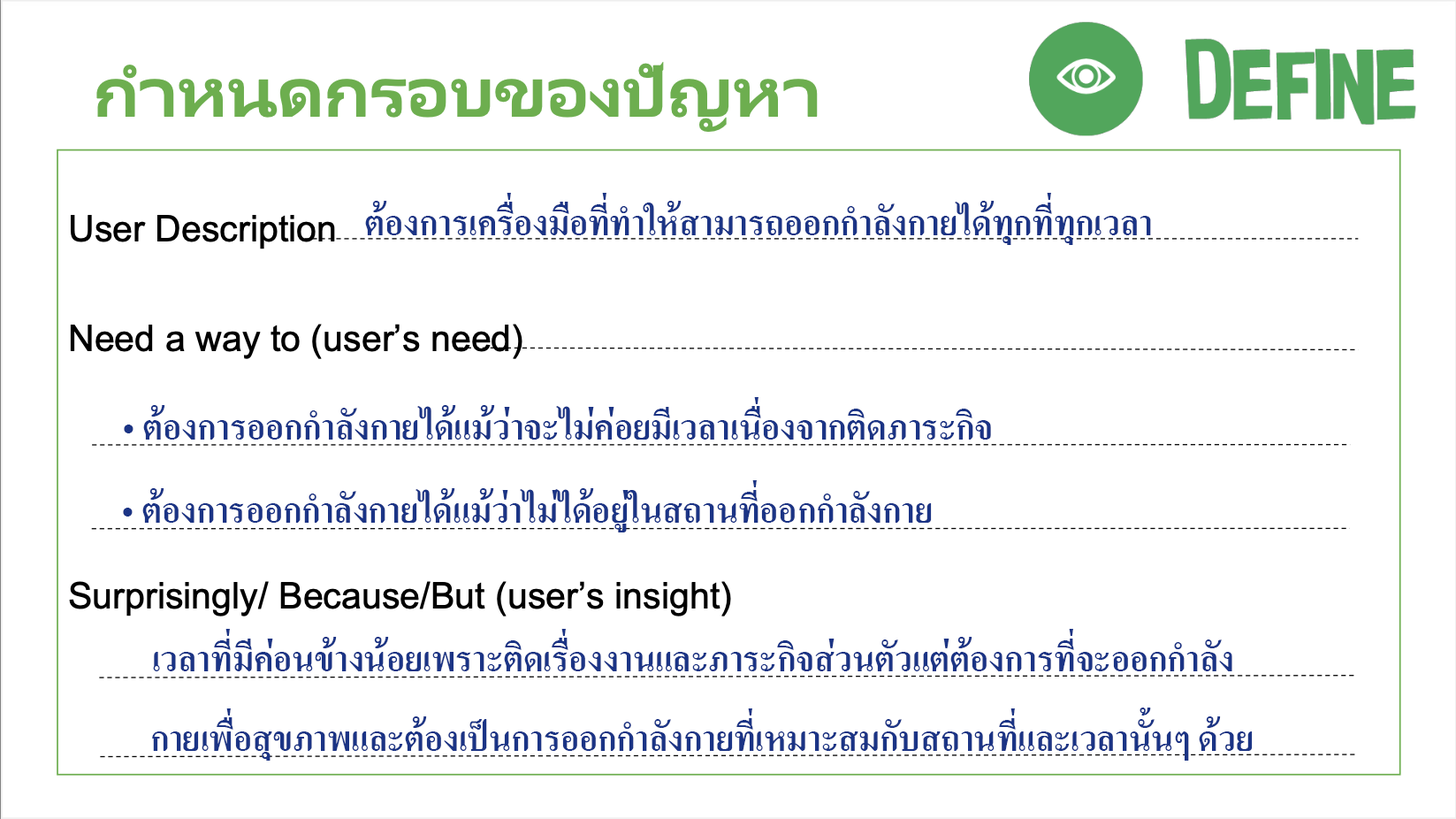
<style>
.page{position:relative;width:1456px;height:819px;background:#ffffff}
.page>*{position:absolute;margin:0}
.t1{font:48.6px "AngsanaUPC-Bold";color:#1b3485}
</style>
<div class="page">
<p class="t1" style="left:365px;top:193px;width:786px;height:52px">ต้องการเครื่องมือที่ทำให้สามารถออกกำลังกายได้ทุกที่ทุกเวลา</p>
<p class="t1" style="left:124px;top:397px;width:867px;height:42px">• ต้องการออกกำลังกายได้แม้ว่าจะไม่ค่อยมีเวลาเนื่องจากติดภาระกิจ</p>
<p class="t1" style="left:123px;top:480px;width:809px;height:52px">• ต้องการออกกำลังกายได้แม้ว่าไม่ได้อยู่ในสถานที่ออกกำลังกาย</p>
<p class="t1" style="left:153px;top:629px;width:1080px;height:42px">เวลาที่มีค่อนข้างน้อยเพราะติดเรื่องงานและภาระกิจส่วนตัวแต่ต้องการที่จะออกกำลัง</p>
<p class="t1" style="left:152px;top:707px;width:1101px;height:53px">กายเพื่อสุขภาพและต้องเป็นการออกกำลังกายที่เหมาะสมกับสถานที่และเวลานั้นๆ ด้วย</p>
</div>
